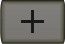
<style>
.page{position:relative;width:65px;height:44px}
.page>*{position:absolute;margin:0}
.t1{font:41.7px "Rockwell";color:#1a1a1a}
</style>
<div class="page">
<p class="t1" style="left:21px;top:10px;width:23px;height:23px">+</p>
</div>
